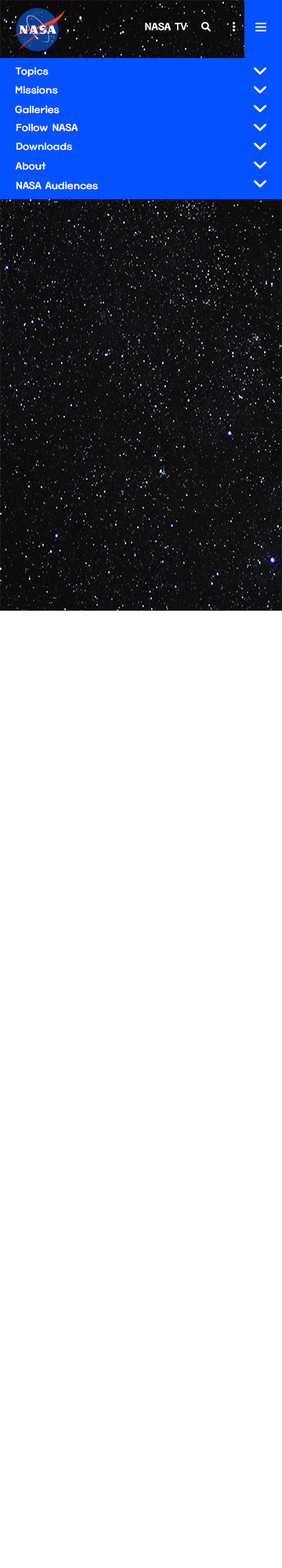
<style>
.page{position:relative;width:282px;height:1568px;background:#ffffff}
.page>*{position:absolute;margin:0}
.t1{font:10.4px "HaanBaekjeB";color:#ffffff}
.t2{font:10.2px "HaanBaekjeB";color:#ffffff}
</style>
<div class="page">
<p class="t1" style="left:145px;top:23px;width:42px;height:8px">NASA TV</p>
<p class="t2" style="left:16px;top:67px;width:33px;height:10px">Topics</p>
<p class="t2" style="left:16px;top:85px;width:42px;height:9px">Missions</p>
<p class="t2" style="left:15px;top:105px;width:45px;height:9px">Galleries</p>
<p class="t2" style="left:16px;top:123px;width:62px;height:9px">Follow NASA</p>
<p class="t2" style="left:16px;top:142px;width:56px;height:9px">Downloads</p>
<p class="t2" style="left:16px;top:162px;width:30px;height:8px">About</p>
<p class="t2" style="left:16px;top:181px;width:82px;height:9px">NASA Audiences</p>
</div>
